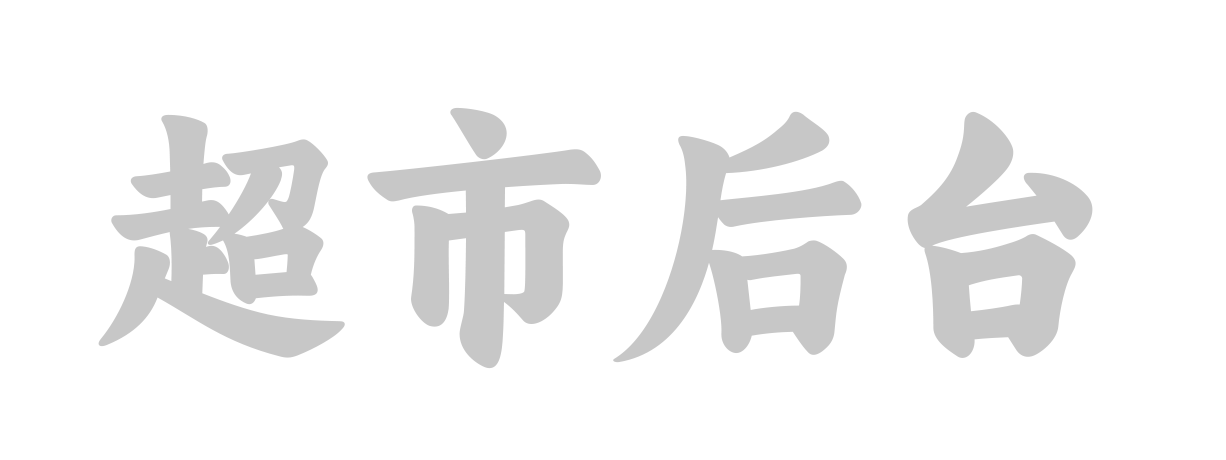
<style>
.page{position:relative;width:1226px;height:460px;background:#ffffff}
.page>*{position:absolute;margin:0}
.t1{font:258.8px "AlimamaDongFangDaKai-Regular";letter-spacing:-0.03em;color:#c7c7c7;font-weight:bold}
</style>
<div class="page">
<p class="t1" style="left:98px;top:107px;width:995px;height:262px">超市后台</p>
</div>
